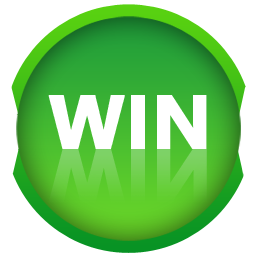
<style>
.page{position:relative;width:256px;height:256px;background:#ffffff}
.page>*{position:absolute;margin:0}
.t1{font:75.5px "SegoeUI-Bold";color:#ffffff;font-weight:bold}
.t2{font:75.5px "SegoeUI-Bold";font-weight:bold}
</style>
<div class="page">
<p class="t1" style="left:48px;top:95px;width:159px;height:54px">WIN</p>
<p class="t2" style="left:48px;top:149px;width:159px;height:54px">WIN</p>
</div>
